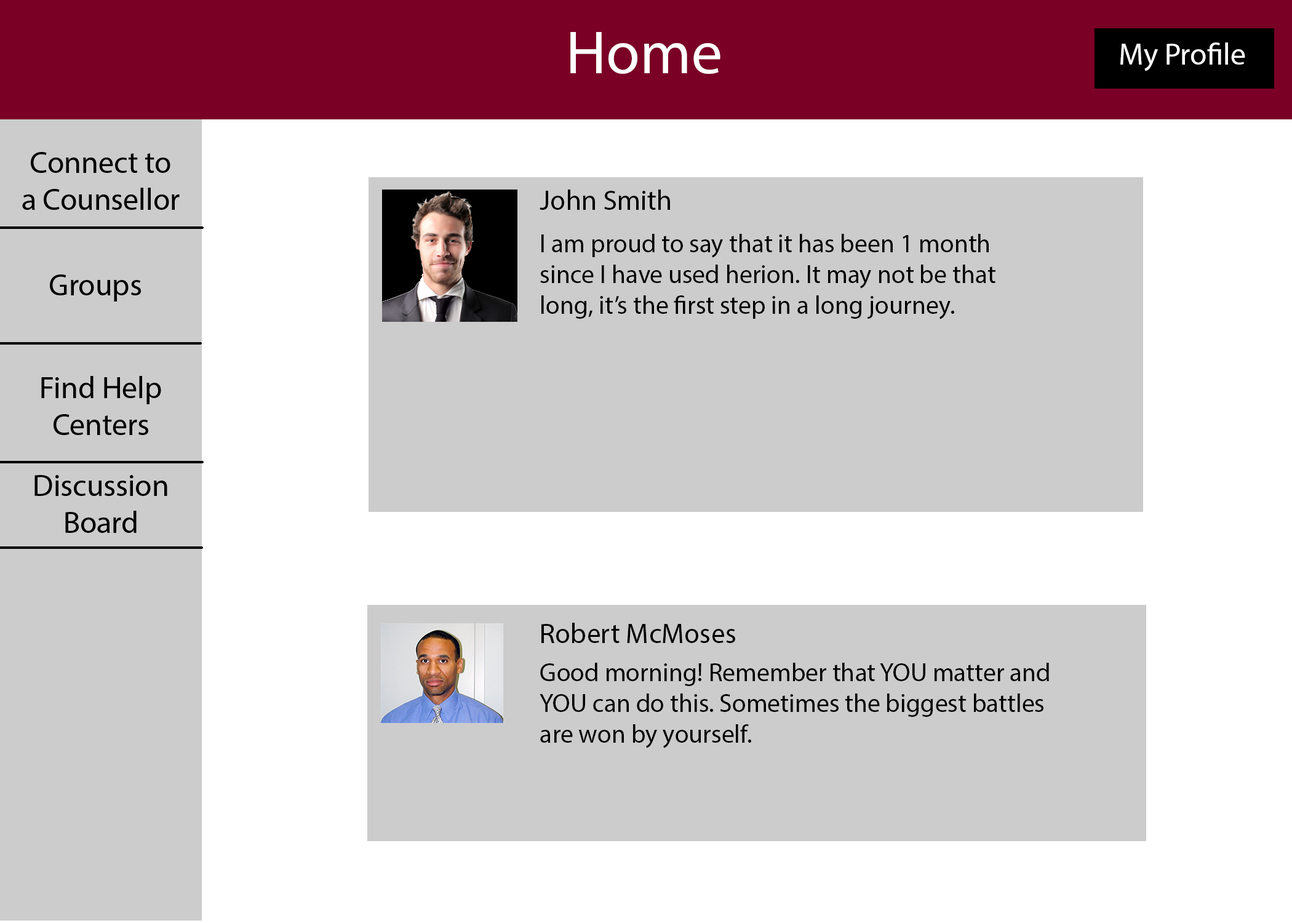
<style>
.page{position:relative;width:1292px;height:923px;background:#cccccc}
.page>*{position:absolute;margin:0}
.t1{font:61.5px "MyriadPro-Regular";color:#ffffff}
.t2{font:30.8px "MyriadPro-Regular";color:#fefefe}
.t3{font:28.2px "MyriadPro-Regular";color:#000000}
.t4{font:25.6px "MyriadPro-Regular";color:#000000}
</style>
<div class="page">
<p class="t1" style="left:570px;top:32px;width:150px;height:42px">Home</p>
<p class="t2" style="left:1120px;top:42px;width:125px;height:29px">My Profile</p>
<p class="t3" style="left:540px;top:190px;width:130px;height:20px">John Smith</p>
<p class="t4" style="left:540px;top:234px;width:455px;height:85px">I am proud to say that it has been 1 month since I have used herion. It may not be that long, it’s the first step in a long journey.</p>
<p class="t3" style="left:541px;top:623px;width:194px;height:20px">Robert McMoses</p>
<p class="t4" style="left:540px;top:663px;width:509px;height:85px">Good morning! Remember that YOU matter and YOU can do this. Sometimes the biggest battles are won by yourself.</p>
</div>
